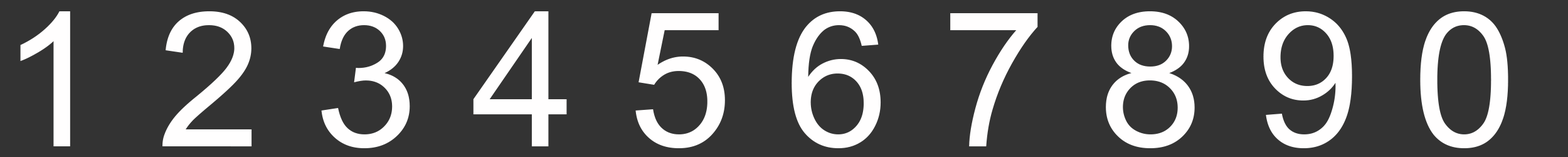
<style>
.page{position:relative;width:1568px;height:157px;background:#333333}
.page>*{position:absolute;margin:0}
.t1{font:188.2px "ArialMT";color:#fffefe}
</style>
<div class="page">
<p class="t1" style="left:20px;top:11px;width:1488px;height:137px">1 2 3 4 5 6 7 8 9 0</p>
</div>
